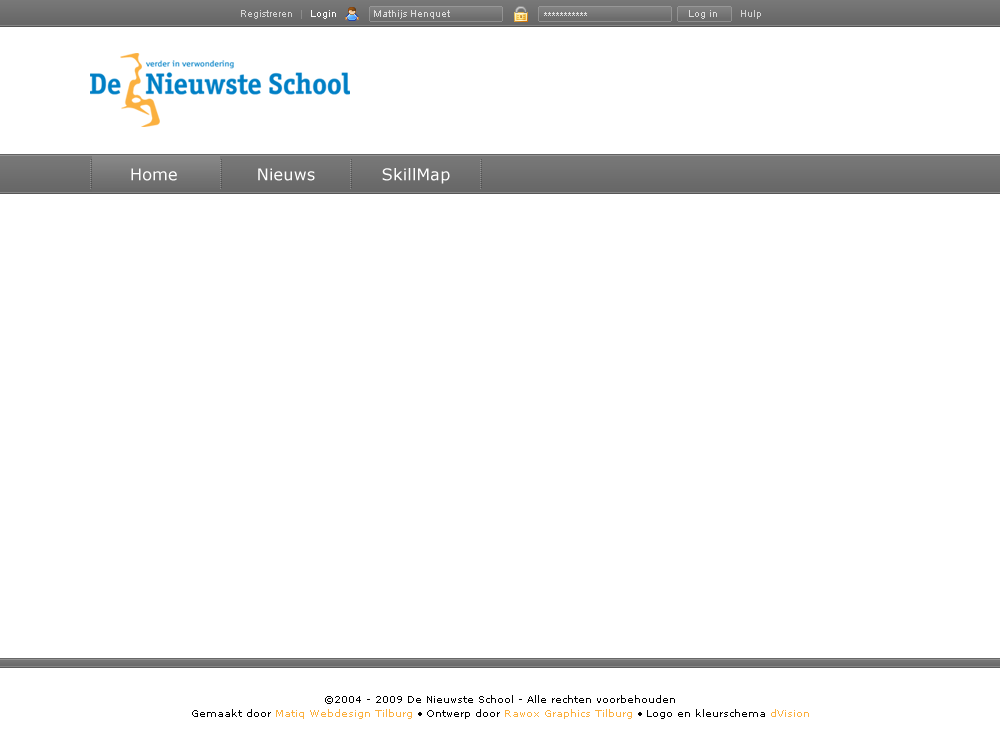
<style>
.page{position:relative;width:1000px;height:750px;background:#ffffff}
.page>*{position:absolute;margin:0}
.t1{font:10px "ArialMT";color:#d3d3d3}
.t2{font:10px "ArialMT";color:#ffffff}
.t3{font:10px "ArialMT";color:#dcdcdc}
.t4{font:11px "ArialMT";color:#dddddd}
.t5{font:16px "Verdana";letter-spacing:0.015em;color:#ffffff}
.t6{font:10px/14px "Verdana";color:#000000}
.t7{font:10px/14px "Verdana";color:#fbb03f}
</style>
<div class="page">
<p class="t1" style="left:241px;top:10px;width:51px;height:9px">Registreren</p>
<p class="t2" style="left:311px;top:10px;width:25px;height:9px">Login</p>
<p class="t3" style="left:374px;top:10px;width:76px;height:9px">Mathijs Henquet</p>
<p class="t4" style="left:544px;top:12px;width:43px;height:4px">***********</p>
<p class="t3" style="left:689px;top:10px;width:28px;height:9px">Log in</p>
<p class="t1" style="left:741px;top:10px;width:20px;height:9px">Hulp</p>
<p class="t5" style="left:131px;top:168px;width:46px;height:13px">Home</p>
<p class="t5" style="left:258px;top:168px;width:57px;height:13px">Nieuws</p>
<p class="t5" style="left:382px;top:168px;width:68px;height:16px">SkillMap</p>
<p class="t6" style="left:192px;top:695px;width:617px;height:24px;text-align:center">©2004 - 2009 De Nieuwste School - Alle rechten voorbehouden<br>Gemaakt door <span class="t7">Matiq Webdesign Tilburg</span> • Ontwerp door <span class="t7">Rawox Graphics Tilburg</span> • Logo en kleurschema <span class="t7">dVision</span></p>
</div>
